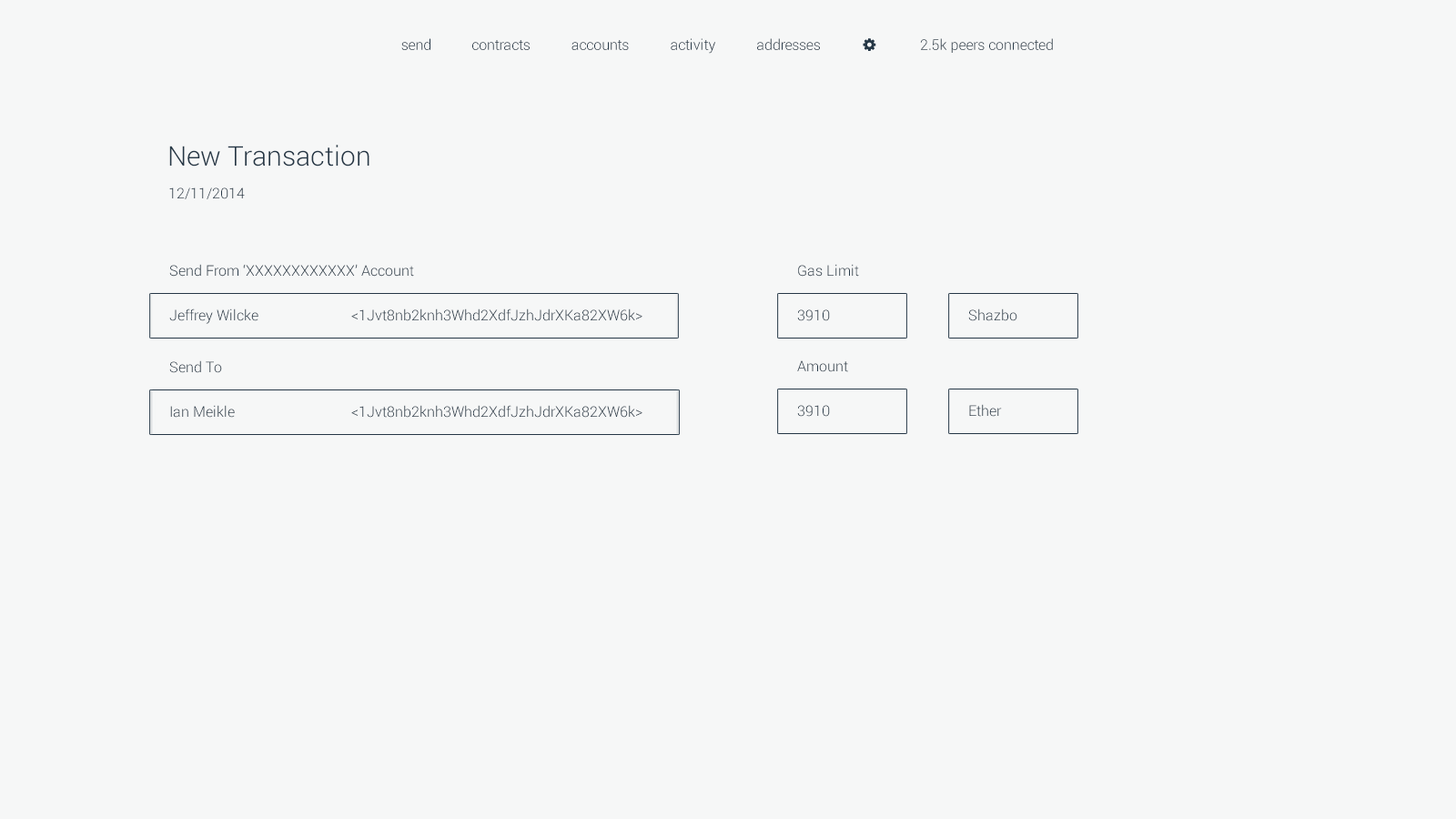
<style>
.page{position:relative;width:1456px;height:819px;background:#f6f7f7}
.page>*{position:absolute;margin:0}
.t1{font:14.6px "Roboto-Light";color:#253746}
.t2{font:27.3px "Roboto-Light";color:#253746}
.t3{font:14.6px "Roboto-Light"}
</style>
<div class="page">
<p class="t1" style="left:401px;top:38px;width:29px;height:12px">send</p>
<p class="t1" style="left:472px;top:40px;width:58px;height:10px">contracts</p>
<p class="t1" style="left:571px;top:40px;width:58px;height:10px">accounts</p>
<p class="t1" style="left:671px;top:38px;width:44px;height:16px">activity</p>
<p class="t1" style="left:757px;top:38px;width:63px;height:12px">addresses</p>
<p class="t1" style="left:920px;top:38px;width:133px;height:15px">2.5k peers connected</p>
<p class="t2" style="left:169px;top:145px;width:200px;height:22px">New Transaction</p>
<p class="t1" style="left:169px;top:187px;width:76px;height:12px">12/11/2014</p>
<p class="t1" style="left:169px;top:264px;width:245px;height:13px">Send From ‘XXXXXXXXXXXX’ Account</p>
<p class="t1" style="left:798px;top:264px;width:61px;height:13px">Gas Limit</p>
<p class="t1" style="left:169px;top:308px;width:89px;height:16px">Jeffrey Wilcke</p>
<p class="t1" style="left:351px;top:308px;width:291px;height:13px">&lt;1Jvt8nb2knh3Whd2XdfJzhJdrXKa82XW6k&gt;</p>
<p class="t1" style="left:797px;top:309px;width:33px;height:12px">3910</p>
<p class="t1" style="left:968px;top:308px;width:49px;height:13px">Shazbo</p>
<p class="t1" style="left:169px;top:360px;width:53px;height:13px">Send To</p>
<p class="t1" style="left:797px;top:360px;width:51px;height:12px">Amount</p>
<p class="t1" style="left:170px;top:405px;width:65px;height:13px">Ian Meikle</p>
<p class="t1" style="left:351px;top:405px;width:291px;height:13px">&lt;1Jvt8nb2knh3Whd2XdfJzhJdrXKa82XW6k&gt;</p>
<p class="t1" style="left:797px;top:405px;width:33px;height:12px">3910</p>
<p class="t3" style="left:969px;top:404px;width:33px;height:13px">Ether</p>
</div>
